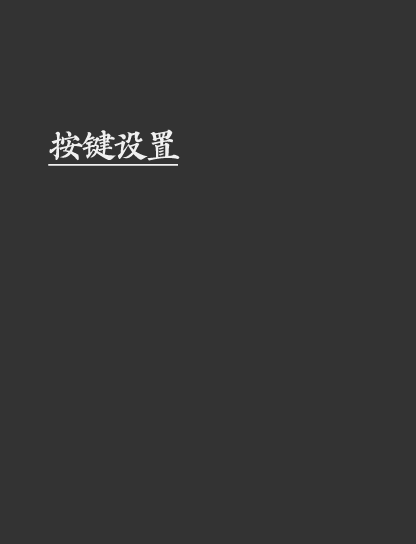
<style>
.page{position:relative;width:416px;height:544px;background:#333333}
.page>*{position:absolute;margin:0}
.t1{font:36px "AaYZQDBTBNon-CommercialUse";letter-spacing:-0.1em;color:#f0f0f0;text-decoration:underline}
</style>
<div class="page">
<p class="t1" style="left:48px;top:129px;width:132px;height:37px">按键设置</p>
</div>
